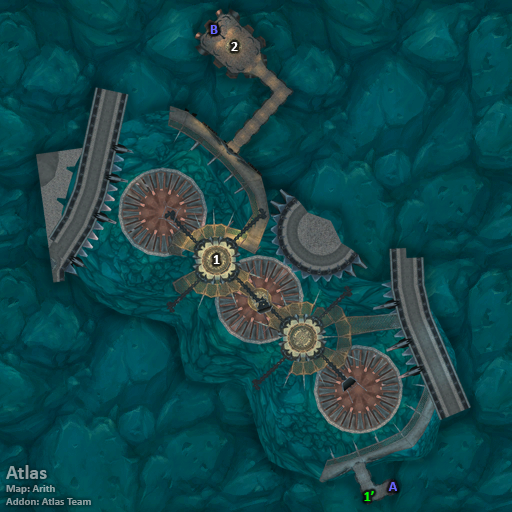
<style>
.page{position:relative;width:512px;height:512px}
.page>*{position:absolute;margin:0}
.t1{font:14px "Calibri-Bold";color:#6666ff}
.t2{font:14px "Calibri-Bold";color:#ffffff}
.t3{font:11px "Calibri-Bold";color:#8d9ea1}
.t4{font:20px "Calibri-Bold";color:#8d9ea1}
.t5{font:14px "Calibri-Bold";color:#00ff00}
</style>
<div class="page">
<p class="t1" style="left:210px;top:25px;width:8px;height:9px">B</p>
<p class="t2" style="left:231px;top:42px;width:7px;height:9px">2</p>
<p class="t2" style="left:213px;top:255px;width:7px;height:9px">1</p>
<p class="t3" style="left:6px;top:465px;width:85px;height:40px"><span class="t4">Atlas<br></span>Map: Arith<br>Addon: Atlas Team</p>
<p class="t1" style="left:388px;top:482px;width:9px;height:9px">A</p>
<p class="t5" style="left:364px;top:491px;width:10px;height:10px">1’</p>
</div>
